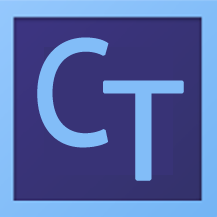
<style>
.page{position:relative;width:217px;height:217px;background:#383376}
.page>*{position:absolute;margin:0}
.t1{font:152.8px "MyriadPro-Regular";color:#82bdf8;font-weight:bold;scale:0.87 1}
.t2{font:133.7px "LucidaSans-Typewriter";color:#82bdf8;font-weight:bold}
</style>
<div class="page">
<p class="t1" style="left:37px;top:37px;width:72px;height:111px">C</p>
<p class="t2" style="left:103px;top:80px;width:81px;height:101px">T</p>
</div>
